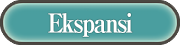
<style>
.page{position:relative;width:180px;height:45px;background:#4a9e9f}
.page>*{position:absolute;margin:0}
.t1{font:26px "RyuminPro-ExBold";letter-spacing:-0.08em;color:#ffffff;scale:0.9 1}
</style>
<div class="page">
<p class="t1" style="left:48px;top:13px;width:85px;height:24px">Ekspansi</p>
</div>
